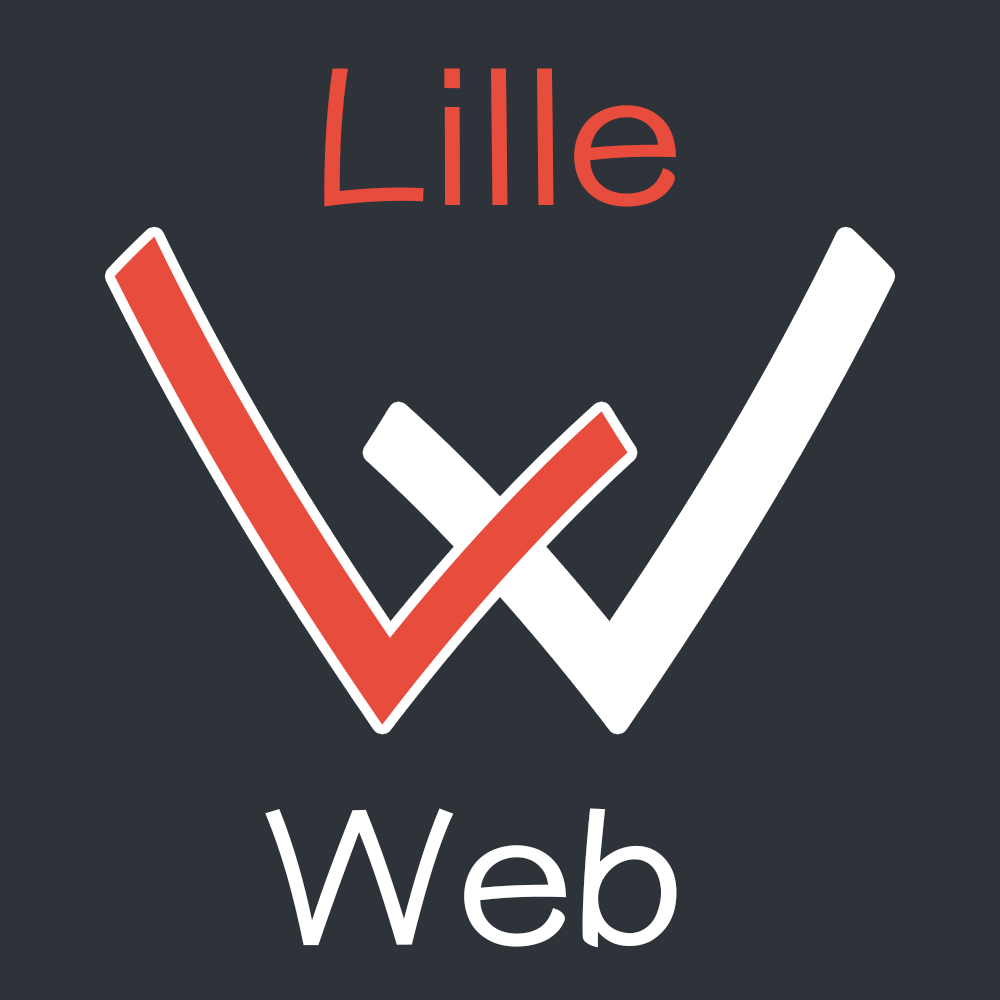
<style>
.page{position:relative;width:1000px;height:1000px;background:#2d3339}
.page>*{position:absolute;margin:0}
.t1{font:190px "YuppyTC-Regular";color:#e74c3c;scale:1.1 1}
.t2{font:699.3px "YuppyTC-Regular";color:#e74c3c;font-style:italic;scale:1.1 1}
.t3{font:699.3px "YuppyTC-Regular";color:#ffffff;font-style:italic;scale:1.1 1}
.t4{font:190px "YuppyTC-Regular";color:#ffffff;scale:1.1 1}
</style>
<div class="page">
<p class="t1" style="left:324px;top:68px;width:352px;height:139px">Lille</p>
<p class="t2" style="left:114px;top:236px;width:514px;height:489px;rotate:-45deg">L</p>
<p class="t3" style="left:372px;top:236px;width:514px;height:489px;rotate:-135deg">L</p>
<p class="t4" style="left:265px;top:808px;width:412px;height:140px">Web</p>
</div>
